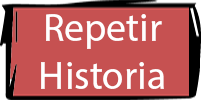
<style>
.page{position:relative;width:201px;height:100px;background:#c65151}
.page>*{position:absolute;margin:0}
.t1{font:39.6px "MyriadHebrew-Regular";color:#ffffff}
</style>
<div class="page">
<p class="t1" style="left:41px;top:14px;width:123px;height:75px;text-align:center">Repetir<br>Historia</p>
</div>
